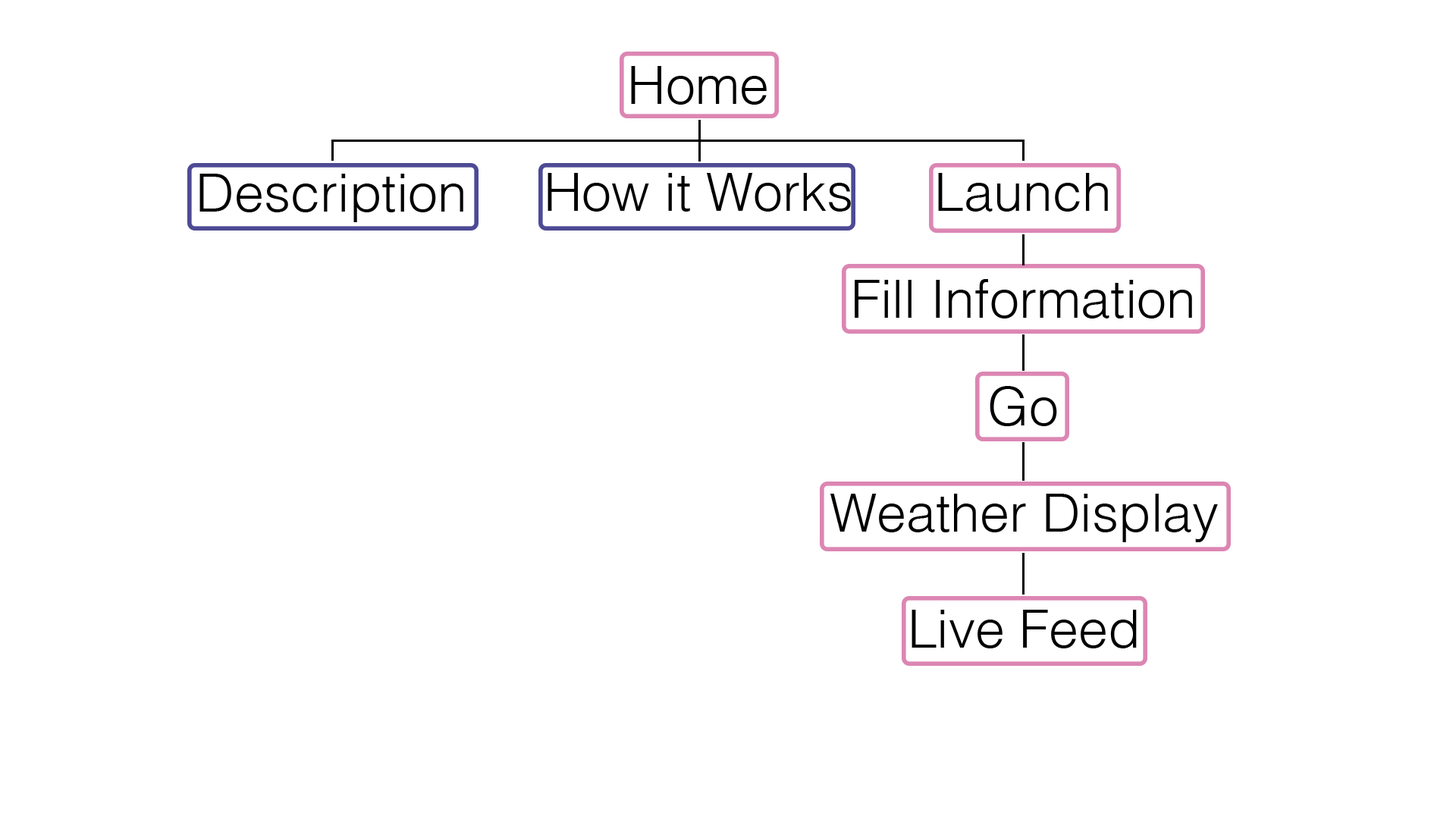
<style>
.page{position:relative;width:1456px;height:819px;background:#ffffff}
.page>*{position:absolute;margin:0}
.t1{font:53.1px "Helvetica-Light";color:#000000}
</style>
<div class="page">
<p class="t1" style="left:631px;top:66px;width:136px;height:39px">Home</p>
<p class="t1" style="left:199px;top:174px;width:264px;height:48px">Description</p>
<p class="t1" style="left:548px;top:173px;width:303px;height:39px">How it Works</p>
<p class="t1" style="left:938px;top:173px;width:170px;height:39px">Launch</p>
<p class="t1" style="left:855px;top:279px;width:337px;height:39px">Fill Information</p>
<p class="t1" style="left:990px;top:386px;width:67px;height:40px">Go</p>
<p class="t1" style="left:830px;top:494px;width:388px;height:48px">Weather Display</p>
<p class="t1" style="left:912px;top:610px;width:225px;height:38px">Live Feed</p>
</div>
